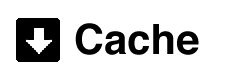
<style>
.page{position:relative;width:240px;height:80px;background:#ffffff}
.page>*{position:absolute;margin:0}
.t1{font:41.7px "Helvetica-Bold";color:#000000}
</style>
<div class="page">
<p class="t1" style="left:75px;top:23px;width:124px;height:32px">Cache</p>
</div>
